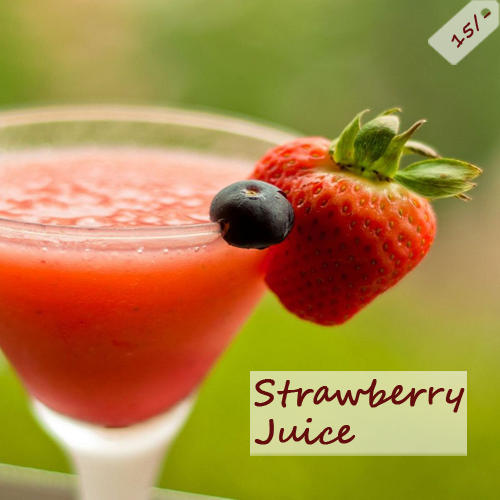
<style>
.page{position:relative;width:500px;height:500px}
.page>*{position:absolute;margin:0}
.t1{font:17.9px "SegoeScript";color:#640d0d;font-weight:bold}
.t2{font:33.5px "SegoeScript";color:#640d0d;font-weight:bold}
</style>
<div class="page">
<p class="t1" style="left:451px;top:12px;width:40px;height:36px;rotate:-41deg">15/-</p>
<p class="t2" style="left:254px;top:379px;width:211px;height:66px">Strawberry<br>Juice</p>
</div>
